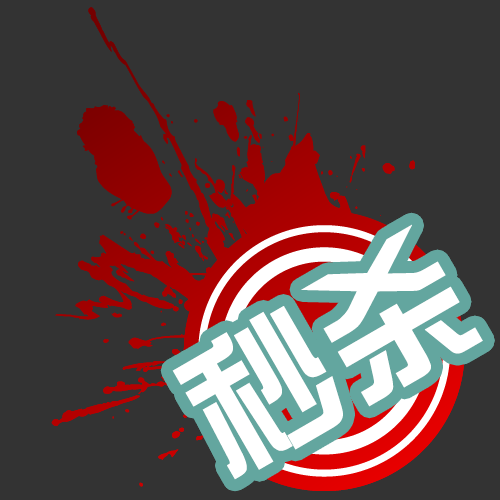
<style>
.page{position:relative;width:500px;height:500px;background:#333333}
.page>*{position:absolute;margin:0}
.t1{font:150px "ç»å¸ç»¼èºä½ç®-regular";color:#ffffff}
</style>
<div class="page">
<p class="t1" style="left:172px;top:224px;width:311px;height:256px;rotate:-30deg">秒杀</p>
</div>
